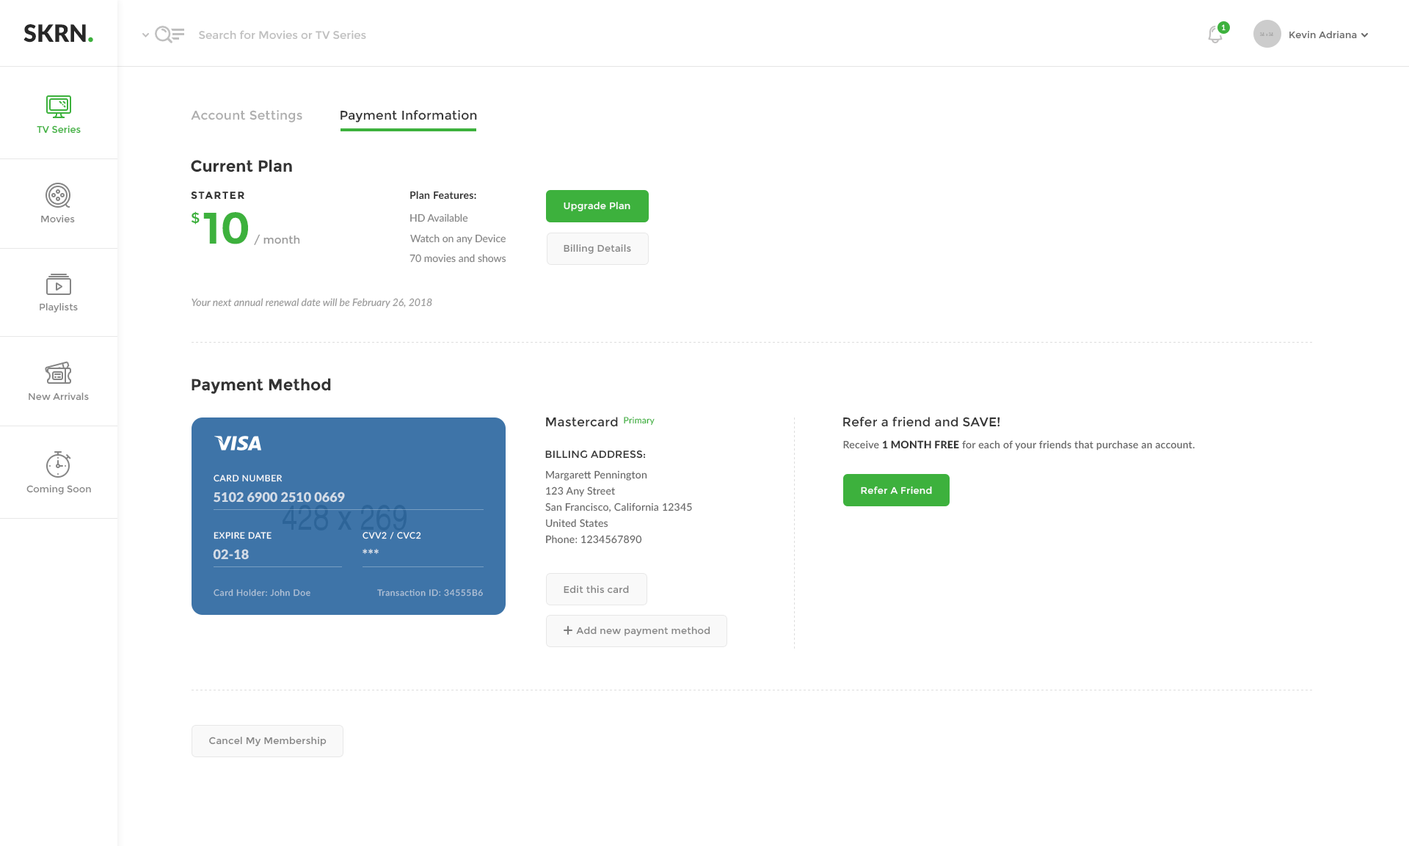
<style>
.page{position:relative;width:1409px;height:846px;background:#ffffff}
.page>*{position:absolute;margin:0}
.t1{font:23.8px "Lato-Black";color:#272727}
.t2{font:27.7px "Lato-Black";color:#3db13d}
.t3{font:7.3px "Lato-Semibold";color:#ffffff}
.t4{font:11px "Montserrat-Regular";color:#bfbfbf}
.t5{font:9.5px "Montserrat-Regular";letter-spacing:0.015em;color:#666666}
.t6{font:12.5px "Montserrat-Regular";letter-spacing:0.017em;color:#adadad}
.t7{font:12.5px "Montserrat-Regular";letter-spacing:0.017em;color:#333333}
.t8{font:9.5px "Montserrat-Regular";color:#3db13d}
.t9{font:16.1px "Montserrat-Bold";color:#333333}
.t10{font:10.3px "Montserrat-Bold";letter-spacing:0.1em;color:#333333;text-transform:uppercase}
.t11{font:10.3px "Lato-Bold";letter-spacing:0.02em;color:#333333}
.t12{font:9.5px "Montserrat-Regular";letter-spacing:0.02em;color:#ffffff}
.t13{font:9.5px "Montserrat-Regular";color:#848484}
.t14{font:14.7px "Montserrat-Regular";color:#3db13d}
.t15{font:11px "Montserrat-Regular";color:#999999}
.t16{font:44px "Montserrat-Bold";color:#3db13d}
.t17{font:10.3px "Lato-Regular";color:#848484}
.t18{font:9.5px "Montserrat-Regular";letter-spacing:0.02em;color:#858585}
.t19{font:10.3px "Lato-Italic";color:#999999}
.t20{font:8.8px "Lato-Regular";letter-spacing:0.02em;color:#3db13d}
.t21{font:10.3px "Montserrat-Regular";letter-spacing:0.017em;color:#333333;text-transform:uppercase}
.t22{font:10.3px "Lato-Semibold";letter-spacing:0.017em;color:#666666}
.t23{font:10.3px "Lato-Heavy";letter-spacing:0.017em;color:#333333}
.t24{font:10.3px/16.1px "Lato-Regular";letter-spacing:0.017em;color:#666666}
.t25{font:8.8px "Lato-Regular";letter-spacing:0.05em;color:#ffffff}
.t26{font:13.2px "Lato-Black";color:#d2dce7}
.t27{font:8.8px "Lato-Regular";letter-spacing:0.05em;color:#ffffff;text-transform:uppercase}
.t28{font:8.8px "Lato-Regular";letter-spacing:0.05em;color:#b0c2d6}
</style>
<div class="page">
<p class="t1" style="left:23px;top:24px;width:70px;height:19px">SKRN<span class="t2">.</span></p>
<p class="t3" style="left:1222px;top:24px;width:4px;height:7px">1</p>
<p class="t4" style="left:199px;top:30px;width:167px;height:10px">Search for Movies or TV Series</p>
<p class="t5" style="left:1290px;top:31px;width:67px;height:8px">Kevin Adriana</p>
<p class="t6" style="left:191px;top:110px;width:111px;height:13px">Account Settings</p>
<p class="t7" style="left:341px;top:110px;width:136px;height:13px">Payment Information</p>
<p class="t8" style="left:37px;top:126px;width:44px;height:8px">TV Series</p>
<p class="t9" style="left:191px;top:159px;width:101px;height:13px">Current Plan</p>
<p class="t10" style="left:191px;top:191px;width:53px;height:9px">starter</p>
<p class="t11" style="left:410px;top:191px;width:66px;height:9px">Plan Features:</p>
<p class="t12" style="left:564px;top:202px;width:66px;height:9px">Upgrade Plan</p>
<p class="t13" style="left:41px;top:215px;width:34px;height:8px">Movies</p>
<p class="t14" style="left:191px;top:211px;width:9px;height:14px">$</p>
<p class="t15" style="left:203px;top:212px;width:97px;height:33px"><span class="t16">10</span> / month</p>
<p class="t17" style="left:410px;top:214px;width:58px;height:8px">HD Available</p>
<p class="t17" style="left:410px;top:234px;width:96px;height:10px">Watch on any Device</p>
<p class="t18" style="left:564px;top:244px;width:67px;height:10px">Billing Details</p>
<p class="t17" style="left:410px;top:254px;width:96px;height:9px">70 movies and shows</p>
<p class="t13" style="left:40px;top:303px;width:38px;height:10px">Playlists</p>
<p class="t19" style="left:192px;top:298px;width:240px;height:10px">Your next annual renewal date will be February 26, 2018</p>
<p class="t9" style="left:192px;top:378px;width:139px;height:16px">Payment Method</p>
<p class="t13" style="left:29px;top:393px;width:60px;height:8px">New Arrivals</p>
<p class="t7" style="left:546px;top:417px;width:72px;height:10px">Mastercard</p>
<p class="t20" style="left:624px;top:417px;width:31px;height:9px">Primary</p>
<p class="t7" style="left:843px;top:417px;width:157px;height:10px">Refer a friend and SAVE!</p>
<p class="t21" style="left:545px;top:450px;width:101px;height:9px">Billing Address:</p>
<p class="t22" style="left:843px;top:440px;width:352px;height:11px">Receive <span class="t23">1 MONTH FREE</span> for each of your friends that purchase an account.</p>
<p class="t24" style="left:545px;top:470px;width:147px;height:74px">Margarett Pennington<br>123 Any Street<br>San Francisco, California 12345<br>United States<br>Phone: 1234567890</p>
<p class="t13" style="left:26px;top:485px;width:65px;height:10px">Coming Soon</p>
<p class="t25" style="left:214px;top:475px;width:69px;height:7px">CARD NUMBER</p>
<p class="t26" style="left:214px;top:492px;width:131px;height:11px">5102 6900 2510 0669</p>
<p class="t12" style="left:861px;top:487px;width:71px;height:8px">Refer A Friend</p>
<p class="t27" style="left:214px;top:532px;width:58px;height:7px">EXPIRE DATE</p>
<p class="t27" style="left:363px;top:532px;width:58px;height:7px">CVV2 / CVC2</p>
<p class="t26" style="left:213px;top:549px;width:36px;height:11px">02-18</p>
<p class="t26" style="left:363px;top:549px;width:16px;height:5px">***</p>
<p class="t28" style="left:214px;top:589px;width:96px;height:8px">Card Holder: John Doe</p>
<p class="t28" style="left:377px;top:589px;width:106px;height:8px">Transaction ID: 34555B6</p>
<p class="t18" style="left:564px;top:586px;width:65px;height:8px">Edit this card</p>
<p class="t18" style="left:576px;top:627px;width:134px;height:9px">Add new payment method</p>
<p class="t18" style="left:209px;top:737px;width:118px;height:9px">Cancel My Membership</p>
</div>
